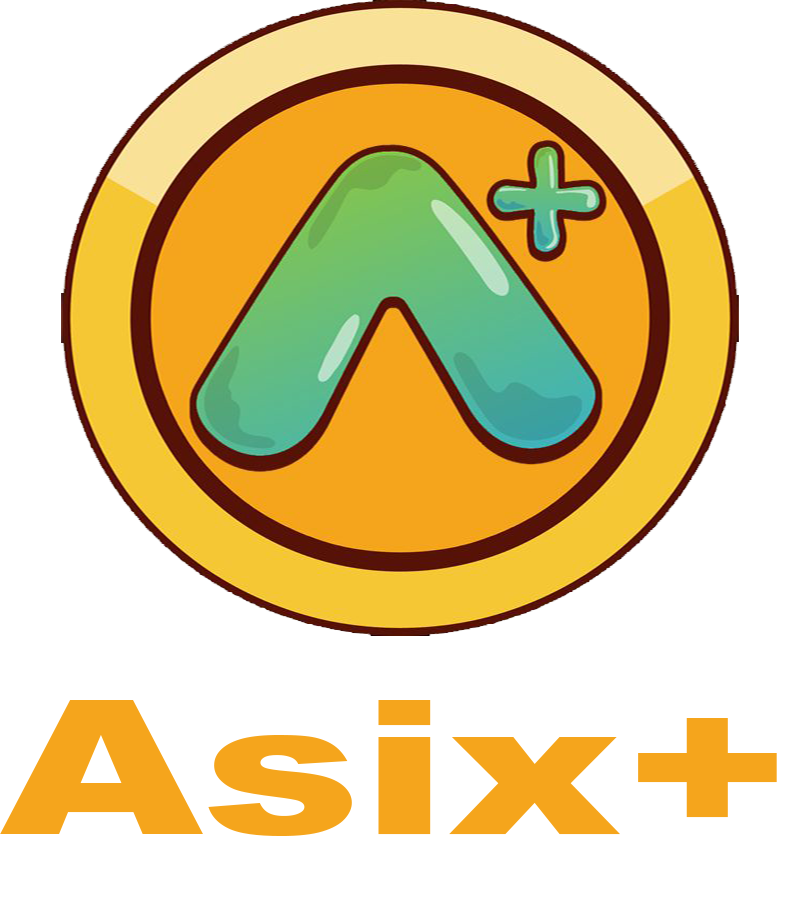
<style>
.page{position:relative;width:800px;height:900px;background:#ffffff}
.page>*{position:absolute;margin:0}
.t1{font:187.5px "Arial-Black";color:#f5a51c;scale:1.39 1}
</style>
<div class="page">
<p class="t1" style="left:0px;top:700px;width:777px;height:136px">Asix+</p>
</div>
